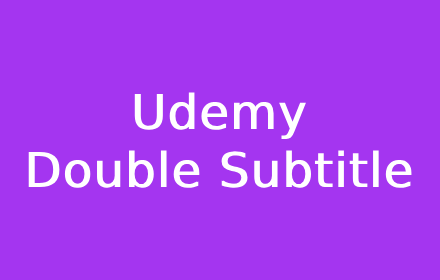
<style>
.page{position:relative;width:440px;height:280px;background:#a435f0}
.page>*{position:absolute;margin:0}
.t1{font:48px "DejaVuSans";color:#ffffff;font-weight:bold}
</style>
<div class="page">
<p class="t1" style="left:28px;top:92px;width:384px;height:96px;text-align:center">Udemy<br>Double Subtitle</p>
</div>
